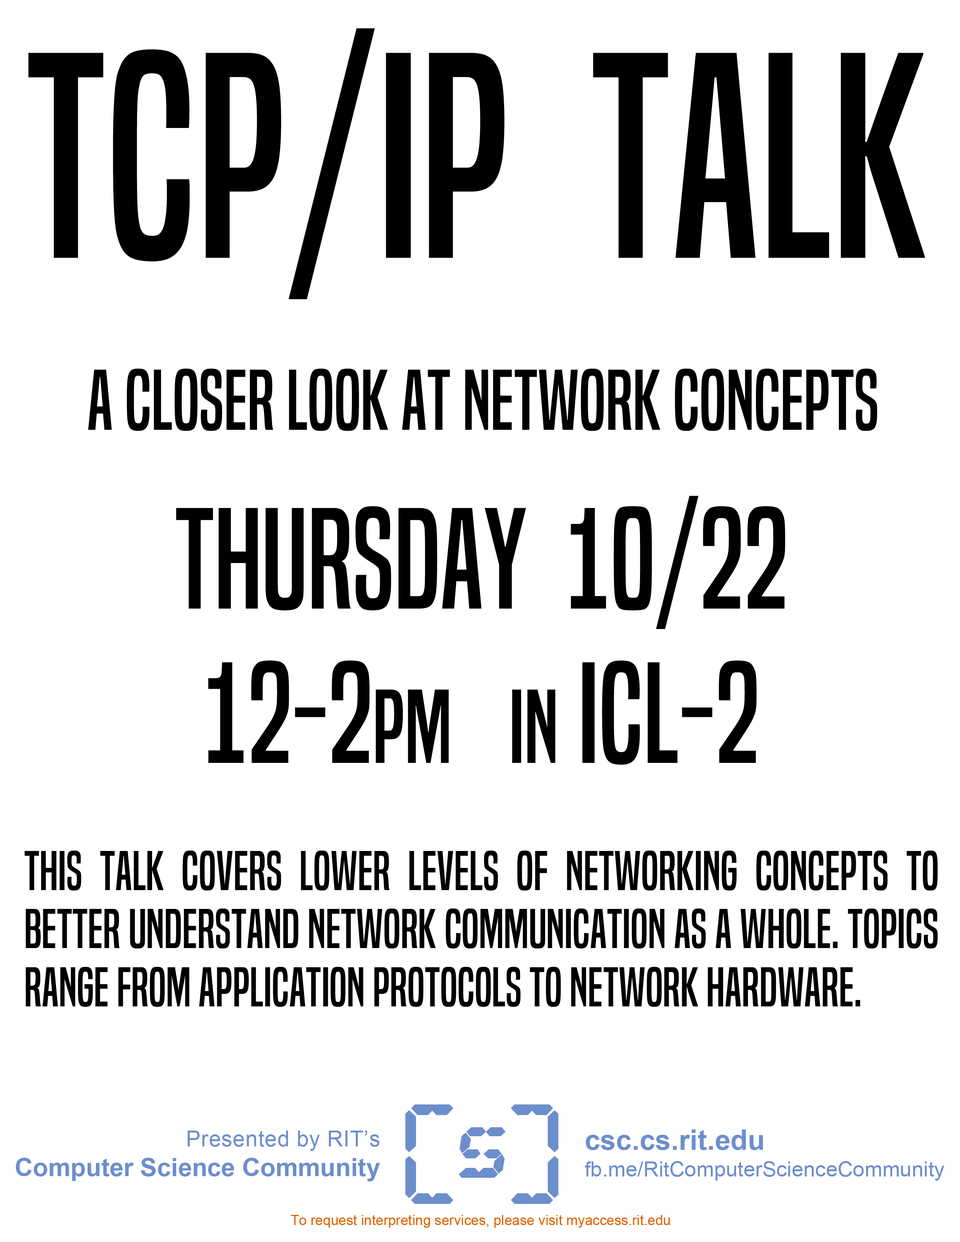
<style>
.page{position:relative;width:960px;height:1242px;background:#ffffff}
.page>*{position:absolute;margin:0}
.t1{font:270.6px "BuiltTitlingRg-Regular";color:#000000}
.t2{font:79.6px "BuiltTitlingRg-Regular";color:#000000}
.t3{font:132.9px/154.2px "BuiltTitlingRg-Regular";color:#000000}
.t4{font:96.8px/154.2px "BuiltTitlingRg-Regular";color:#000000}
.t5{font:51.7px/58.3px "BuiltTitlingRg-Regular";color:#000000}
.t6{font:25.1px/29.8px "Arial-BoldMT";color:#6d8ecc}
.t7{font:22px/29.8px "ArialMT";letter-spacing:0.02em;color:#6d8ecc}
.t8{font:21.2px/26.7px "ArialMT";color:#6d8ecc}
.t9{font:28.2px/26.7px "Arial-BoldMT";color:#6d8ecc}
.t10{font:13.9px "ArialMT";color:#de6100}
</style>
<div class="page">
<p class="t1" style="left:28px;top:28px;width:897px;height:271px">TCP/IP  Talk</p>
<p class="t2" style="left:88px;top:369px;width:789px;height:62px">A closer look at network concepts</p>
<p class="t3" style="left:176px;top:496px;width:609px;height:269px;text-align:center">thursday  10/22<br>12-2<span class="t4">pm    in</span> icl-2</p>
<p class="t5" style="left:24px;top:851px;width:914px;height:156px;text-align:justify">This talk covers lower levels of networking concepts to better understand network communication as a whole. Topics range from application protocols to network hardware.</p>
<p class="t6" style="left:16px;top:1131px;width:364px;height:51px;text-align:right"><span class="t7">Presented by RIT’s<br></span>Computer Science Community</p>
<p class="t8" style="left:585px;top:1130px;width:359px;height:51px"><span class="t9">csc.cs.rit.edu<br></span>fb.me/RitComputerScienceCommunity</p>
<p class="t10" style="left:291px;top:1215px;width:379px;height:13px">To request interpreting services, please visit myaccess.rit.edu</p>
</div>
